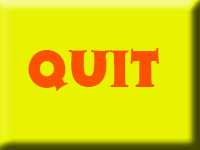
<style>
.page{position:relative;width:200px;height:150px;background:#e9f200}
.page>*{position:absolute;margin:0}
.t1{font:50px "Colbert";color:#fa5200}
</style>
<div class="page">
<p class="t1" style="left:28px;top:48px;width:132px;height:43px">QUIT</p>
</div>
